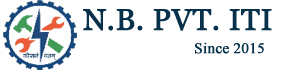
<style>
.page{position:relative;width:300px;height:70px;background:#ffffff}
.page>*{position:absolute;margin:0}
.t1{font:29.7px "Vani";color:#07314a;font-weight:bold}
.t2{font:14.8px "TimesNewRomanPSMT";color:#07314a;font-weight:bold}
</style>
<div class="page">
<p class="t1" style="left:83px;top:9px;width:189px;height:22px">N.B. PVT. ITI</p>
<p class="t2" style="left:195px;top:42px;width:69px;height:12px">Since 2015</p>
</div>
